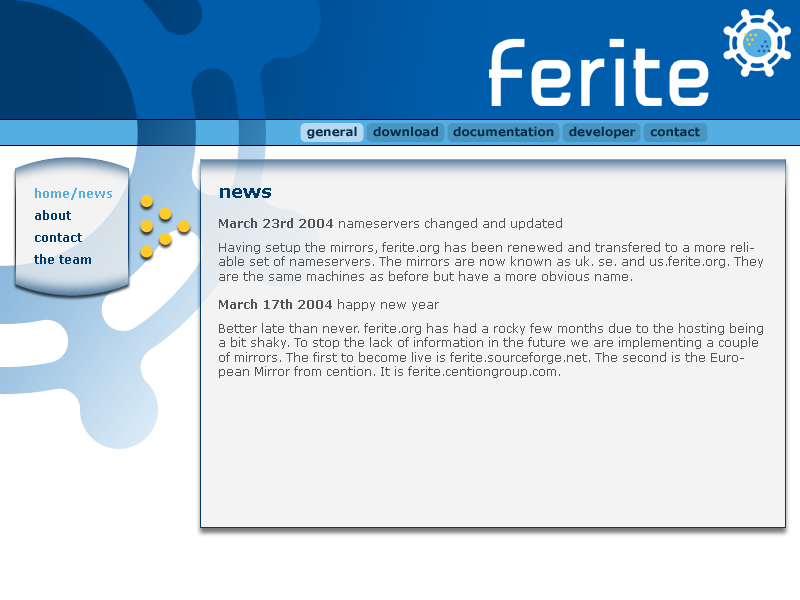
<style>
.page{position:relative;width:800px;height:600px;background:#f3f3f3}
.page>*{position:absolute;margin:0}
.t1{font:12px/22px "Verdana-Bold";color:#003b6e}
.t2{font:12px/22px "Verdana-Bold";color:#54aee1}
.t3{font:12px "Verdana";color:#535353}
.t4{font:18px "Verdana-Bold";color:#003b6e}
.t5{font:12px/30px "Verdana-Bold";color:#535353}
.t6{font:12px/30px "Verdana";color:#535353}
.t7{font:12px/24px "Verdana";color:#535353}
.t8{font:12px/14px "Verdana-Bold";color:#535353}
.t9{font:12px/14px "Verdana";color:#535353}
</style>
<div class="page">
<p class="t1" style="left:34px;top:188px;width:78px;height:76px"><span class="t2">home/news <br></span>about <br>contact <br>the team</p>
<p class="t3" style="left:219px;top:188px;width:544px;height:190px"><span class="t4">news<br></span><span class="t5">March 23rd 2004 </span><span class="t6">nameservers changed and updated <br></span><span class="t7">Having setup the mirrors, ferite.org has been renewed and transfered to a more </span>reliable set of nameservers. The mirrors are now known as uk. se. and us.ferite.org. They are the same machines as before but have a more obvious name. <br><br><span class="t8">March 17th 2004</span><span class="t9"> happy new year <br></span><span class="t7">Better late than never. ferite.org has had a rocky few months due to the hosting </span>being a bit shaky. To stop the lack of information in the future we are implementing a couple of mirrors. The first to become live is ferite.sourceforge.net. The second is the European Mirror from cention. It is ferite.centiongroup.com.</p>
</div>
